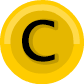
<style>
.page{position:relative;width:84px;height:84px;background:#e5b700}
.page>*{position:absolute;margin:0}
.t1{font:63.5px "LucidaConsole";color:#000000}
</style>
<div class="page">
<p class="t1" style="left:22px;top:19px;width:33px;height:43px">C</p>
</div>
